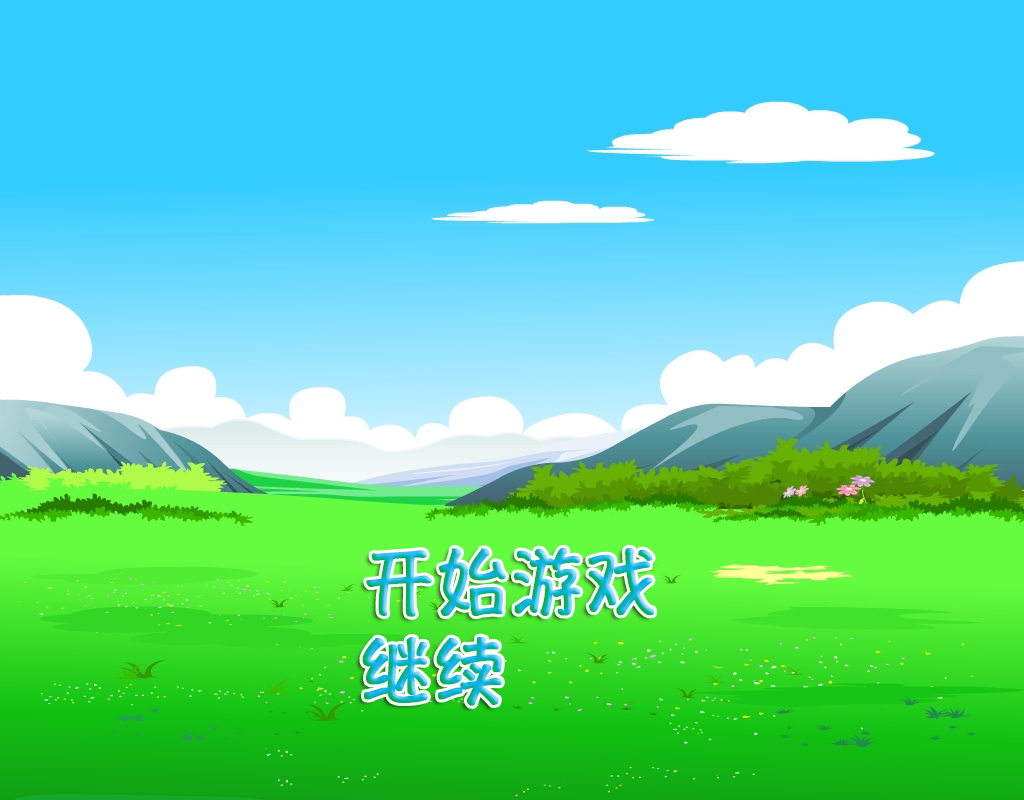
<style>
.page{position:relative;width:1024px;height:800px;background:#32ccfe}
.page>*{position:absolute;margin:0}
.t1{font:72px "HannotateSC-W7";font-weight:bold}
</style>
<div class="page">
<p class="t1" style="left:366px;top:548px;width:289px;height:69px">开始游戏</p>
<p class="t1" style="left:362px;top:636px;width:140px;height:70px">继续</p>
</div>
